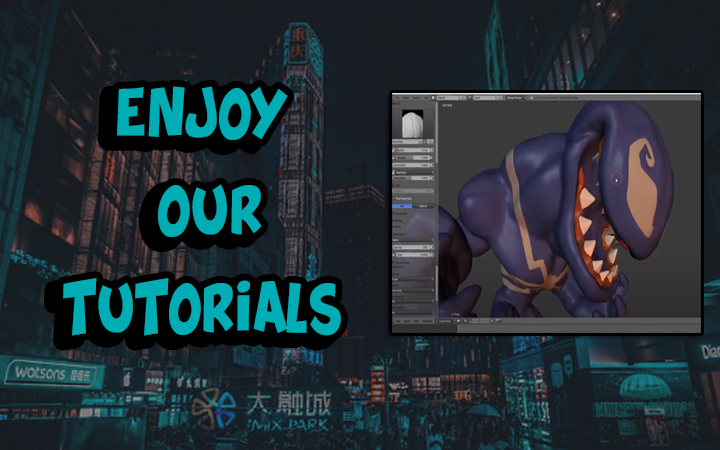
<style>
.page{position:relative;width:720px;height:450px}
.page>*{position:absolute;margin:0}
.t1{font:40.6px "Splatch";color:#00adb5;scale:0.89 1}
</style>
<div class="page">
<p class="t1" style="left:63px;top:86px;width:278px;height:250px;text-align:center">ENJOY<br><br> OUR <br><br>TUTORIALS</p>
</div>
